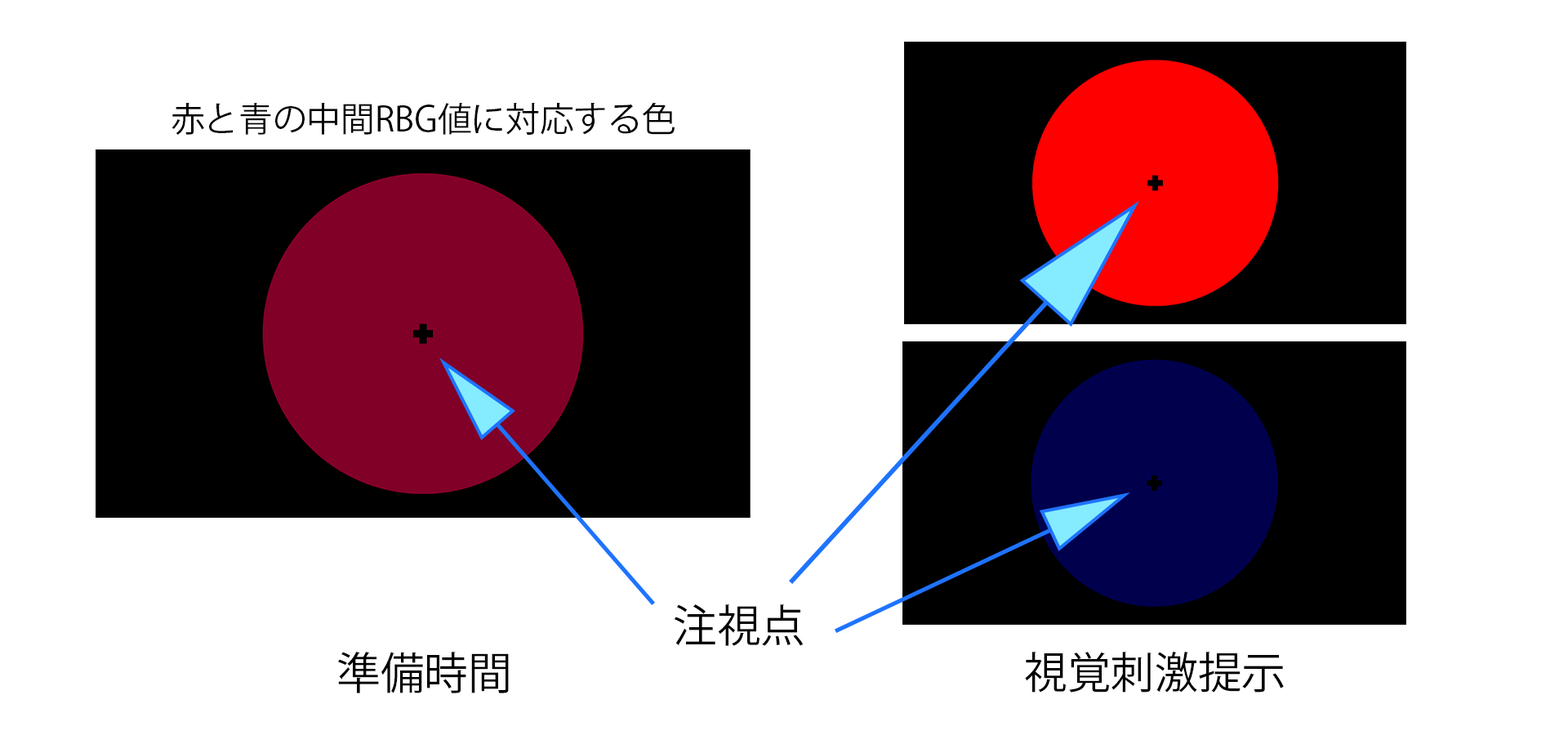
<style>
.page{position:relative;width:1568px;height:735px;background:#ffffff}
.page>*{position:absolute;margin:0}
.t1{font:34px "KozGoPr6N-Regular";color:#000000}
.t2{font:44.2px "KozGoPr6N-Regular";color:#000000}
.t3{font:43.5px "KozGoPr6N-Regular";color:#000000}
</style>
<div class="page">
<p class="t1" style="left:172px;top:102px;width:503px;height:33px">赤と青の中間RBG値に対応する色</p>
<p class="t2" style="left:674px;top:604px;width:130px;height:42px">注視点</p>
<p class="t2" style="left:338px;top:652px;width:171px;height:41px">準備時間</p>
<p class="t3" style="left:1025px;top:651px;width:259px;height:42px">視覚刺激提示</p>
</div>
